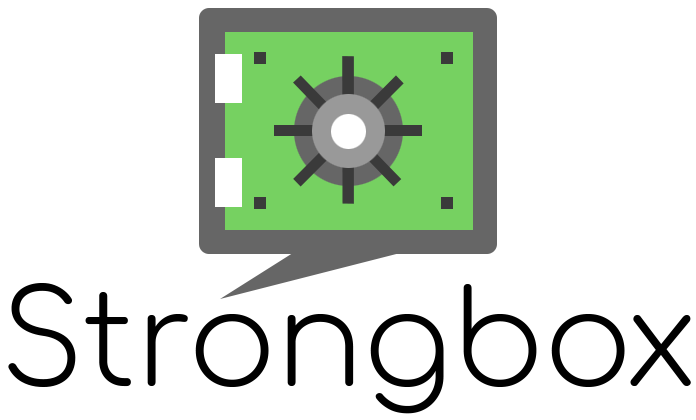
<style>
.page{position:relative;width:696px;height:420px;background:#ffffff}
.page>*{position:absolute;margin:0}
.t1{font:130px "Comfortaa-Light";color:#000000}
</style>
<div class="page">
<p class="t1" style="left:8px;top:283px;width:683px;height:131px">Strongbox</p>
</div>
